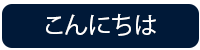
<style>
.page{position:relative;width:200px;height:50px;background:#001938}
.page>*{position:absolute;margin:0}
.t1{font:24px "KozGoPr6N-Regular";color:#ffffff}
</style>
<div class="page">
<p class="t1" style="left:46px;top:13px;width:110px;height:23px">こんにちは</p>
</div>
